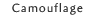
<style>
.page{position:relative;width:96px;height:16px;background:#ffffff}
.page>*{position:absolute;margin:0}
.t1{font:12px "Amira-Light";letter-spacing:0.1em;color:#333333}
</style>
<div class="page">
<p class="t1" style="left:12px;top:3px;width:71px;height:12px">Camouflage</p>
</div>
